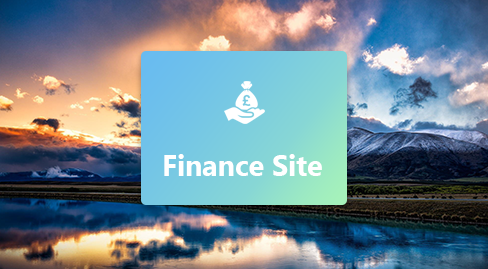
<style>
.page{position:relative;width:488px;height:269px}
.page>*{position:absolute;margin:0}
.t1{font:28.6px "Gadugi-Bold";color:#ffffff}
</style>
<div class="page">
<p class="t1" style="left:164px;top:154px;width:158px;height:22px">Finance Site</p>
</div>
